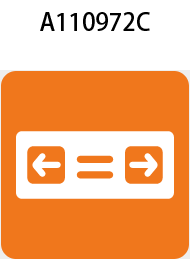
<style>
.page{position:relative;width:190px;height:259px;background:#f0771c}
.page>*{position:absolute;margin:0}
.t1{font:24px "AdobeHeitiStd-Regular";color:#000000}
</style>
<div class="page">
<p class="t1" style="left:40px;top:12px;width:110px;height:19px">A110972C</p>
</div>
